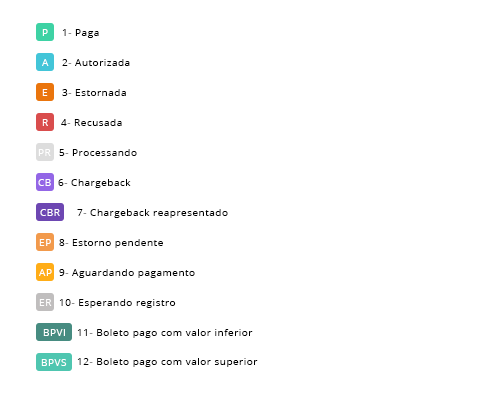
<style>
.page{position:relative;width:500px;height:400px;background:#ffffff}
.page>*{position:absolute;margin:0}
.t1{font:10px "OpenSans";letter-spacing:0.05em;color:#ffffff}
.t2{font:10px "OpenSans";letter-spacing:0.05em;color:#000000}
</style>
<div class="page">
<p class="t1" style="left:42px;top:29px;width:6px;height:7px">P</p>
<p class="t2" style="left:62px;top:29px;width:37px;height:9px">1- Paga</p>
<p class="t1" style="left:42px;top:59px;width:7px;height:7px">A</p>
<p class="t2" style="left:62px;top:59px;width:68px;height:7px">2- Autorizada</p>
<p class="t1" style="left:42px;top:89px;width:6px;height:7px">E</p>
<p class="t2" style="left:62px;top:89px;width:64px;height:7px">3- Estornada</p>
<p class="t1" style="left:42px;top:119px;width:6px;height:7px">R</p>
<p class="t2" style="left:61px;top:119px;width:61px;height:7px">4- Recusada</p>
<p class="t1" style="left:38px;top:149px;width:13px;height:7px">PR</p>
<p class="t2" style="left:59px;top:149px;width:78px;height:7px">5- Processando</p>
<p class="t1" style="left:38px;top:179px;width:13px;height:7px">CB</p>
<p class="t2" style="left:58px;top:179px;width:73px;height:9px">6- Chargeback</p>
<p class="t1" style="left:40px;top:209px;width:20px;height:7px">CBR</p>
<p class="t2" style="left:77px;top:209px;width:151px;height:9px">7- Chargeback reapresentado</p>
<p class="t1" style="left:39px;top:239px;width:12px;height:7px">EP</p>
<p class="t2" style="left:59px;top:239px;width:104px;height:9px">8- Estorno pendente</p>
<p class="t1" style="left:39px;top:269px;width:13px;height:7px">AP</p>
<p class="t2" style="left:59px;top:269px;width:136px;height:9px">9- Aguardando pagamento</p>
<p class="t1" style="left:39px;top:299px;width:13px;height:7px">ER</p>
<p class="t2" style="left:59px;top:299px;width:117px;height:9px">10- Esperando registro</p>
<p class="t1" style="left:43px;top:329px;width:22px;height:7px">BPVI</p>
<p class="t2" style="left:77px;top:329px;width:176px;height:9px">11- Boleto pago com valor inferior</p>
<p class="t1" style="left:41px;top:359px;width:26px;height:7px">BPVS</p>
<p class="t2" style="left:77px;top:358px;width:181px;height:9px">12- Boleto pago com valor superior</p>
</div>
